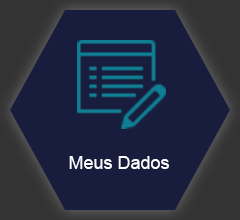
<style>
.page{position:relative;width:240px;height:220px;background:#191d3d}
.page>*{position:absolute;margin:0}
.t1{font:18px "ArialMT";color:#fcfcff}
</style>
<div class="page">
<p class="t1" style="left:69px;top:156px;width:100px;height:13px">Meus Dados</p>
</div>
